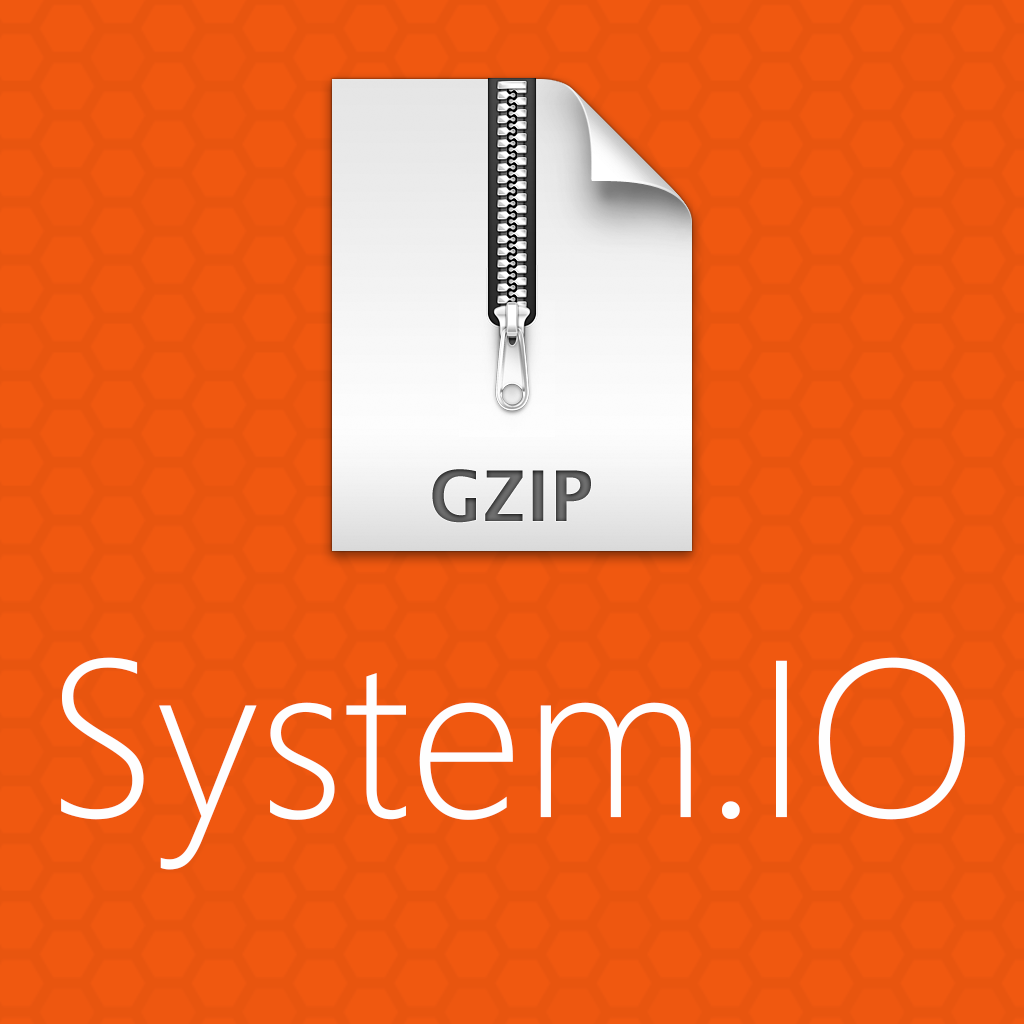
<style>
.page{position:relative;width:1024px;height:1024px;background:#f05810}
.page>*{position:absolute;margin:0}
.t1{font:223.1px "SegoeUI-Light";color:#fefefe}
</style>
<div class="page">
<p class="t1" style="left:61px;top:657px;width:904px;height:213px">System.IO</p>
</div>
